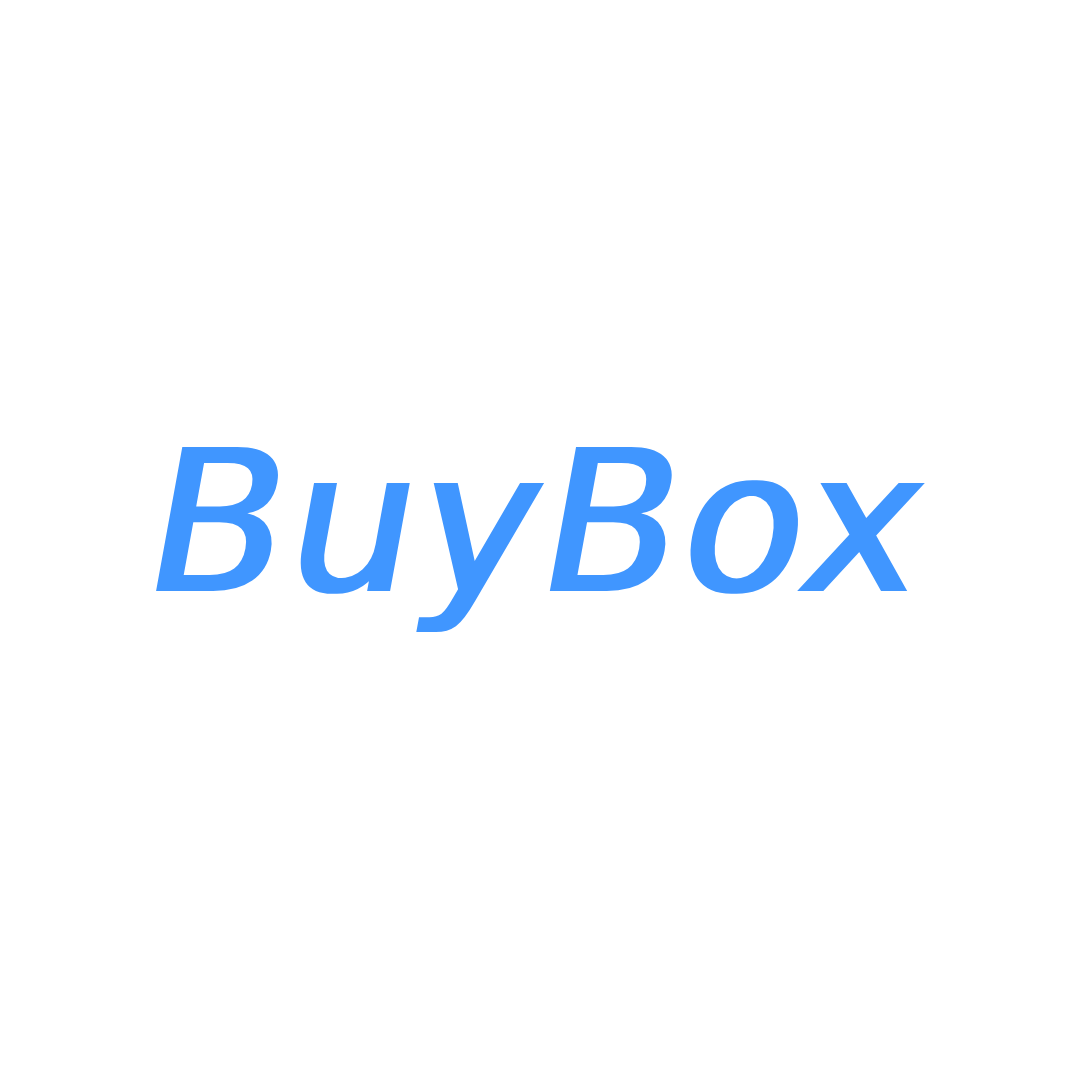
<style>
.page{position:relative;width:1080px;height:1080px;background:#ffffff}
.page>*{position:absolute;margin:0}
.t1{font:197.6px "DejaVuSans";color:#4096ff;font-weight:bold;font-style:italic}
</style>
<div class="page">
<p class="t1" style="left:156px;top:446px;width:769px;height:187px">BuyBox</p>
</div>
